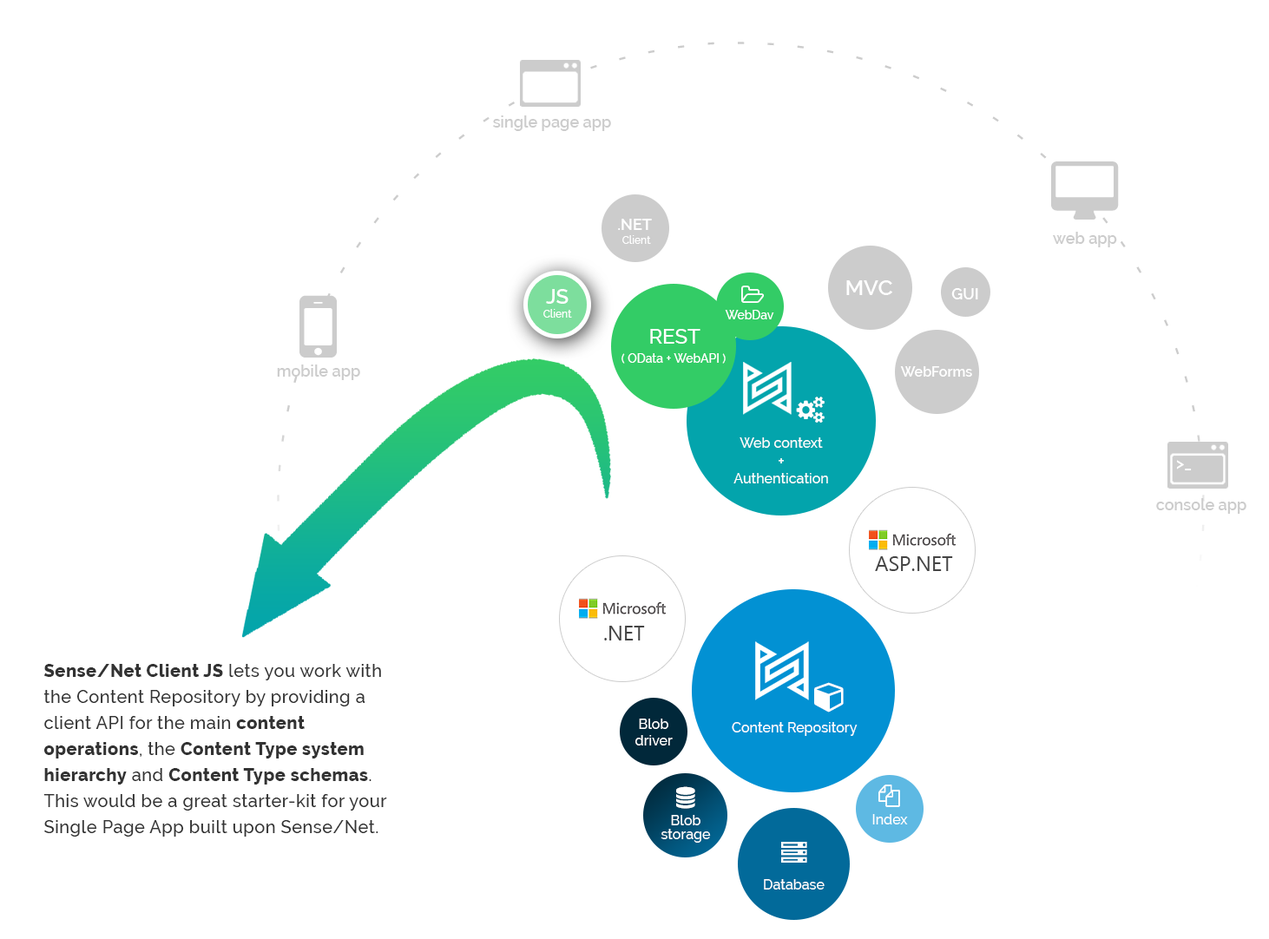
<style>
.page{position:relative;width:1269px;height:939px;background:#ffffff}
.page>*{position:absolute;margin:0}
.t1{font:15.6px "Raleway-SemiBold";color:#cccccc}
.t2{font:10.4px/13.9px "Raleway-Medium";color:#ffffff}
.t3{font:15.6px/13.9px "Raleway-SemiBold";color:#ffffff}
.t4{font:21.7px "Raleway-SemiBold";color:#ffffff}
.t5{font:20.8px/13.9px "Raleway-SemiBold";color:#ffffff}
.t6{font:15.6px "Raleway-SemiBold";color:#ffffff}
.t7{font:12.2px "Raleway-Medium";color:#ffffff}
.t8{font:20.8px "Raleway-Medium";color:#ffffff}
.t9{font:13.9px "Raleway-SemiBold";color:#ffffff}
.t10{font:13.9px "Raleway-Medium";color:#ffffff}
.t11{font:15.6px "Raleway-Medium";color:#ffffff}
.t12{font:20.8px "SegoeUI";color:#444444}
.t13{font:17.4px/26px "Raleway-Medium";letter-spacing:0.025em;color:#333333}
.t14{font:17.4px/26px "Raleway-ExtraBold";letter-spacing:0.025em;color:#333333}
.t15{font:13.9px/13.9px "Raleway-Medium";color:#ffffff}
</style>
<div class="page">
<p class="t1" style="left:493px;top:115px;width:118px;height:16px">single page app</p>
<p class="t2" style="left:618px;top:219px;width:34px;height:25px;text-align:center"><span class="t3">.NET <br></span>Client</p>
<p class="t1" style="left:1053px;top:232px;width:64px;height:15px">web app</p>
<p class="t4" style="left:847px;top:280px;width:46px;height:15px">MVC</p>
<p class="t2" style="left:544px;top:289px;width:28px;height:29px;text-align:center"><span class="t5">JS<br></span>Client</p>
<p class="t6" style="left:952px;top:288px;width:26px;height:12px">GUI</p>
<p class="t7" style="left:725px;top:310px;width:49px;height:10px">WebDav</p>
<p class="t8" style="left:650px;top:329px;width:51px;height:15px">REST</p>
<p class="t7" style="left:622px;top:353px;width:104px;height:11px">( OData + WebAPI )</p>
<p class="t1" style="left:277px;top:365px;width:83px;height:15px">mobile app</p>
<p class="t9" style="left:900px;top:366px;width:72px;height:11px">WebForms</p>
<p class="t10" style="left:734px;top:438px;width:94px;height:46px;text-align:center">Web context<br><span class="t11">+<br></span>Authentication</p>
<p class="t6" style="left:1176px;top:460px;width:16px;height:11px">&gt;_</p>
<p class="t1" style="left:1156px;top:498px;width:91px;height:16px">console app</p>
<p class="t12" style="left:875px;top:557px;width:78px;height:14px">ASP.NET</p>
<p class="t12" style="left:604px;top:626px;width:41px;height:15px">.NET</p>
<p class="t13" style="left:43px;top:664px;width:344px;height:173px"><span class="t14">Sense/Net Client JS</span> lets you work with the Content Repository by providing a client API for the main <span class="t14">content operations</span>, the <span class="t14">Content Type system hierarchy</span> and <span class="t14">Content Type schemas</span>. This would be a great starter-kit for your Single Page App built upon Sense/Net.</p>
<p class="t10" style="left:636px;top:719px;width:37px;height:27px;text-align:center">Blob<br>driver</p>
<p class="t10" style="left:732px;top:722px;width:126px;height:14px">Content Repository</p>
<p class="t15" style="left:661px;top:815px;width:50px;height:28px;text-align:center">Blob storage</p>
<p class="t10" style="left:873px;top:814px;width:35px;height:11px">Index</p>
<p class="t10" style="left:764px;top:880px;width:61px;height:10px">Database</p>
</div>
